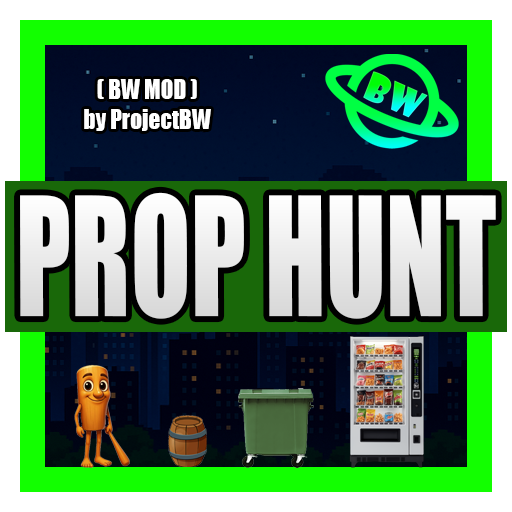
<style>
.page{position:relative;width:512px;height:512px}
.page>*{position:absolute;margin:0}
.t1{font:25.1px "Impact";color:#ffffff;scale:0.93 1}
.t2{font:152.5px "Impact";color:#ffffff;scale:0.72 1}
</style>
<div class="page">
<p class="t1" style="left:84px;top:79px;width:127px;height:52px;text-align:center">( BW MOD )<br>by ProjectBW</p>
<p class="t2" style="left:20px;top:192px;width:476px;height:127px">PROP HUNT</p>
</div>
